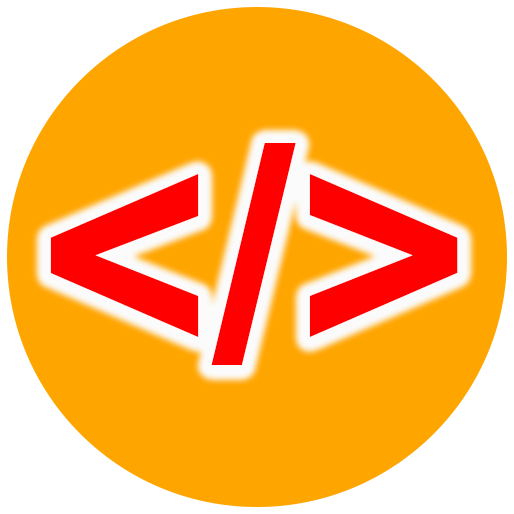
<style>
.page{position:relative;width:514px;height:514px;background:#ffa500}
.page>*{position:absolute;margin:0}
.t1{font:300px "Arial-BoldMT";color:#ff0000}
</style>
<div class="page">
<p class="t1" style="left:50px;top:143px;width:408px;height:222px">&lt;/&gt;</p>
</div>
